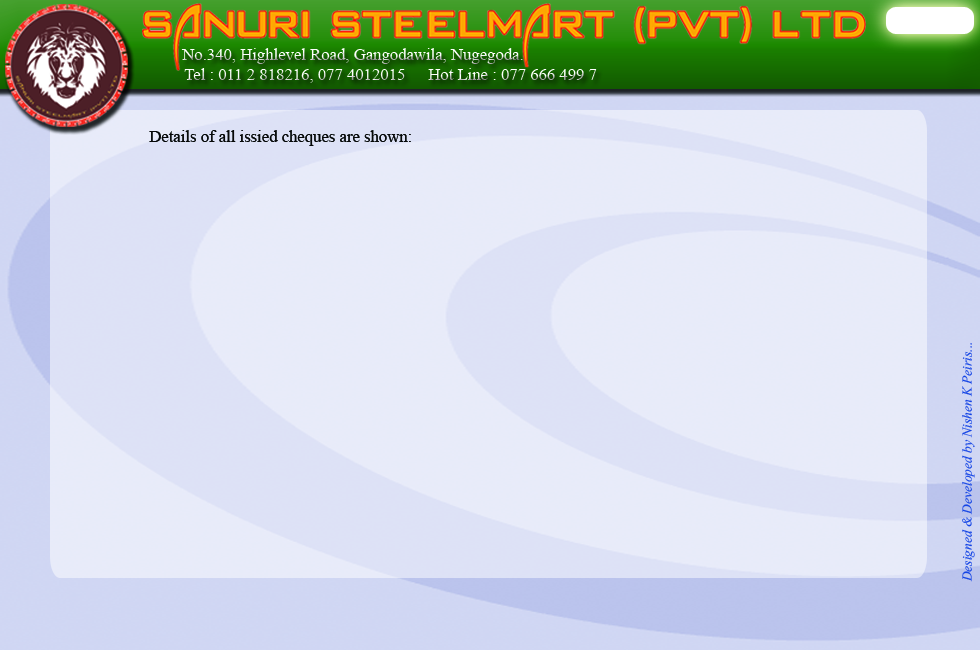
<style>
.page{position:relative;width:980px;height:650px;background:#e8ebf9}
.page>*{position:absolute;margin:0}
.t1{font:16.6px "TimesNewRomanPSMT"}
.t2{font:16.7px "TimesNewRomanPSMT";color:#060808}
.t3{font:16.7px "Vijaya";color:#1546e5}
</style>
<div class="page">
<p class="t1" style="left:181px;top:48px;width:342px;height:16px">No.340, Highlevel Road, Gangodawila, Nugegoda.</p>
<p class="t1" style="left:184px;top:68px;width:221px;height:15px">Tel : 011 2 818216, 077 4012015</p>
<p class="t1" style="left:428px;top:68px;width:169px;height:12px">Hot Line : 077 666 499 7</p>
<p class="t2" style="left:149px;top:130px;width:262px;height:16px">Details of all issied cheques are shown:</p>
<p class="t3" style="left:962px;top:343px;width:13px;height:239px;rotate:-90deg">Designed &amp; Developed by Nishen K Peiris...</p>
</div>
